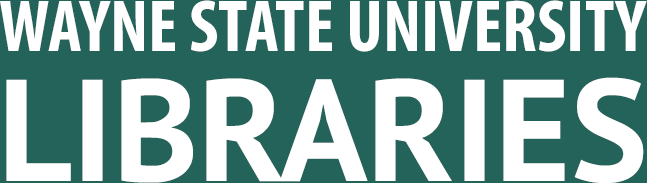
<style>
.page{position:relative;width:647px;height:183px;background:#236359}
.page>*{position:absolute;margin:0}
.t1{font:74.2px "MyriadPro-BoldCond";color:#ffffff}
.t2{font:144.4px "PTSans-Bold";color:#ffffff}
</style>
<div class="page">
<p class="t1" style="left:0px;top:0px;width:647px;height:52px">WAYNE STATE UNIVERSITY</p>
<p class="t2" style="left:6px;top:77px;width:638px;height:106px">LIBRARIES</p>
</div>
